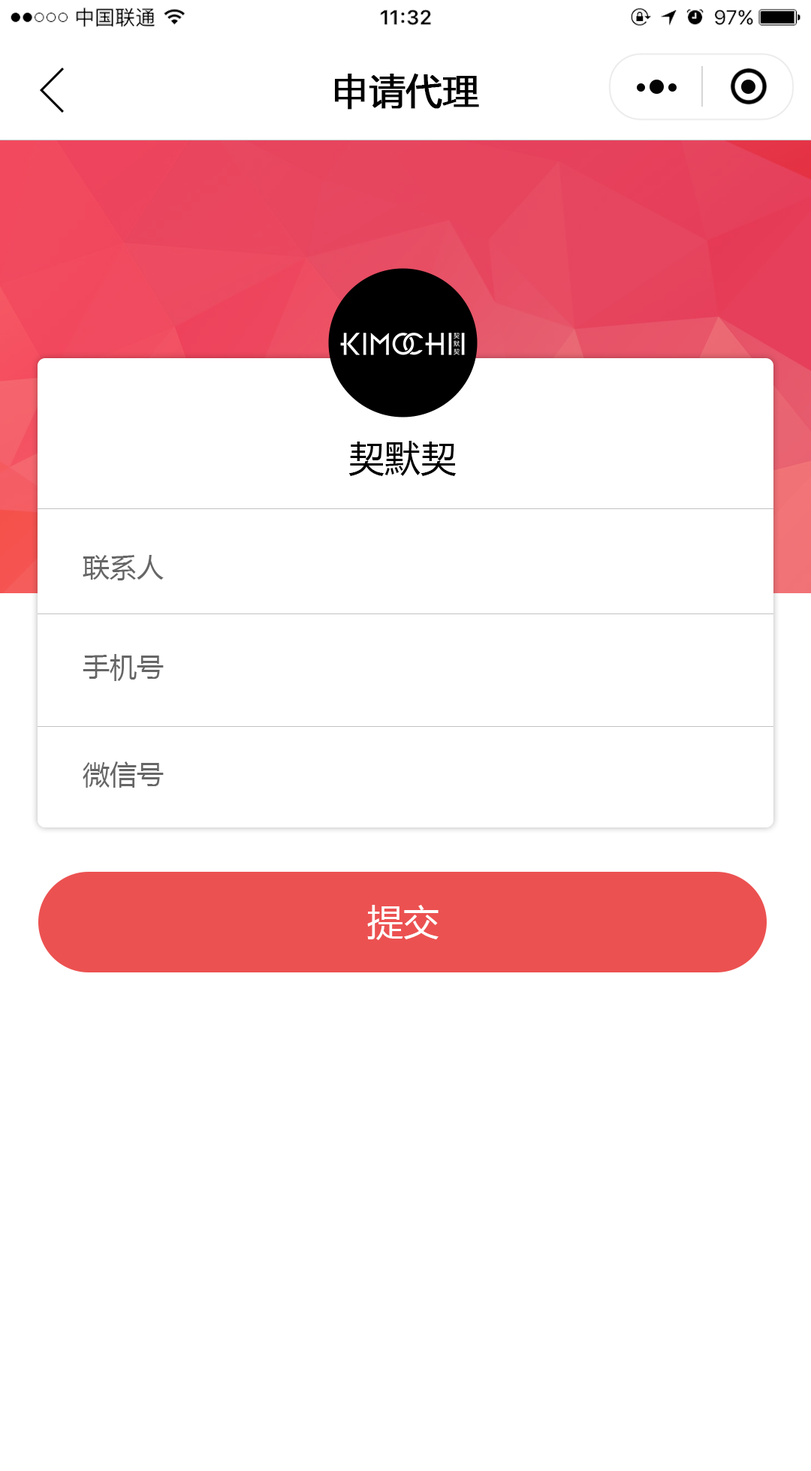
<style>
.page{position:relative;width:811px;height:1471px;background:#ffffff}
.page>*{position:absolute;margin:0}
.t1{font:36px "MicrosoftYaHei";color:#000000;font-weight:bold}
.t2{font:36px "MicrosoftYaHei";color:#000000}
.t3{font:27px "MicrosoftYaHei";color:#666666}
.t4{font:36px "MicrosoftYaHei";color:#ffffff}
</style>
<div class="page">
<p class="t1" style="left:335px;top:74px;width:144px;height:36px">申请代理</p>
<p class="t2" style="left:348px;top:441px;width:108px;height:35px">契默契</p>
<p class="t3" style="left:83px;top:555px;width:81px;height:25px">联系人</p>
<p class="t3" style="left:83px;top:654px;width:81px;height:27px">手机号</p>
<p class="t3" style="left:83px;top:761px;width:81px;height:27px">微信号</p>
<p class="t4" style="left:367px;top:905px;width:71px;height:35px">提交</p>
</div>
